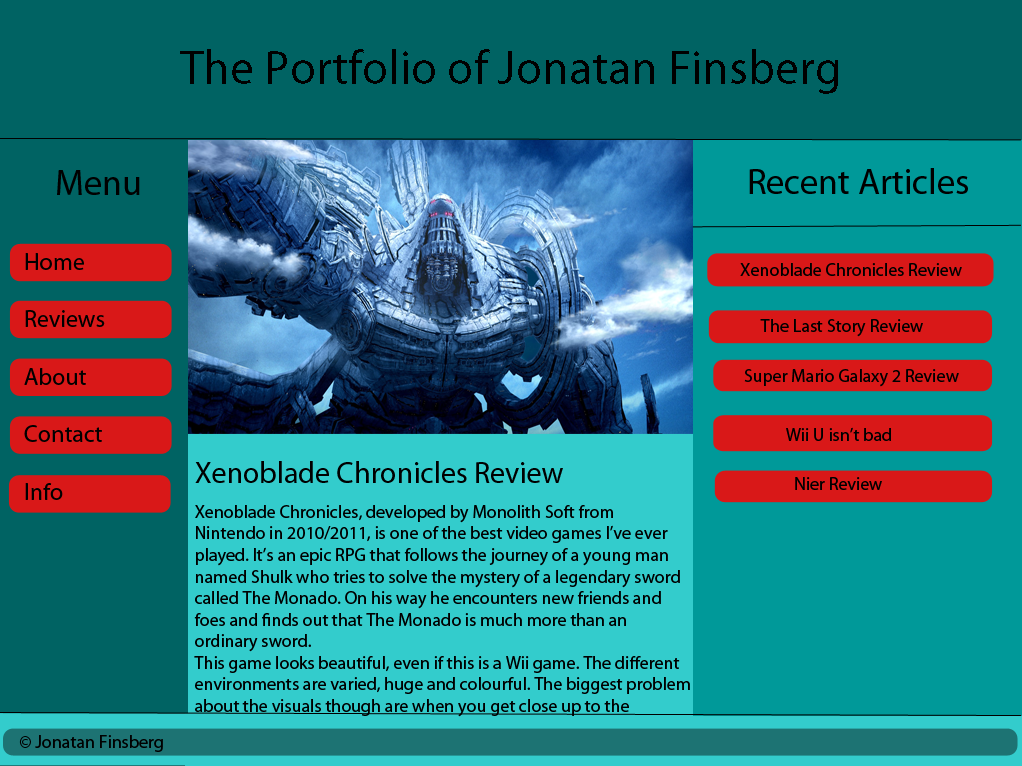
<style>
.page{position:relative;width:1022px;height:766px;background:#006363}
.page>*{position:absolute;margin:0}
.t1{font:48px "MyriadPro-Regular";color:#000000}
.t2{font:36px "MyriadPro-Regular";color:#000000}
.t3{font:23.9px "MyriadPro-Regular";color:#000000}
.t4{font:18px "MyriadPro-Regular";color:#000000}
.t5{font:29.9px "MyriadPro-Regular";color:#000000}
</style>
<div class="page">
<p class="t1" style="left:180px;top:49px;width:658px;height:45px">The Portfolio of Jonatan Finsberg</p>
<p class="t2" style="left:57px;top:170px;width:83px;height:25px">Menu</p>
<p class="t2" style="left:749px;top:168px;width:219px;height:26px">Recent Articles</p>
<p class="t3" style="left:24px;top:253px;width:81px;height:247px"><span class="t2"><br></span><br>Home<br><br>Reviews<br><br>About<br><br>Contact<br><br>Info</p>
<p class="t4" style="left:740px;top:263px;width:222px;height:13px">Xenoblade Chronicles Review</p>
<p class="t4" style="left:760px;top:319px;width:163px;height:18px">The Last Story Review</p>
<p class="t4" style="left:744px;top:369px;width:215px;height:18px">Super Mario Galaxy 2 Review</p>
<p class="t4" style="left:786px;top:427px;width:105px;height:14px">Wii U isn’t bad</p>
<p class="t4" style="left:194px;top:461px;width:496px;height:256px"><span class="t5">Xenoblade Chronicles Review<br><br></span>Xenoblade Chronicles, developed by Monolith Soft from <br>Nintendo in 2010/2011, is one of the best video games I’ve ever <br>played. It’s an epic RPG that follows the journey of a young man<br>named Shulk who tries to solve the mystery of a legendary sword <br>called The Monado. On his way he encounters new friends and <br>foes and finds out that The Monado is much more than an <br>ordinary sword. <br>This game looks beautiful, even if this is a Wii game. The different<br>environments are varied, huge and colourful. The biggest problem<br>about the visuals though are when you get close up to the</p>
<p class="t4" style="left:795px;top:477px;width:87px;height:13px">Nier Review</p>
<p class="t4" style="left:19px;top:735px;width:144px;height:17px">© Jonatan Finsberg</p>
</div>
